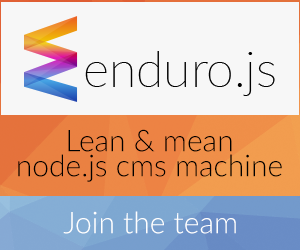
<style>
.page{position:relative;width:300px;height:250px;background:#f7f7f7}
.page>*{position:absolute;margin:0}
.t1{font:30px/25px "Lato-Light";color:#000000}
.t2{font:30px "Lato-Light";color:#ffffff}
</style>
<div class="page">
<p class="t1" style="left:18px;top:129px;width:264px;height:53px;text-align:center">Lean &amp; mean<br>node.js cms machine</p>
<p class="t2" style="left:63px;top:211px;width:173px;height:23px">Join the team</p>
</div>
